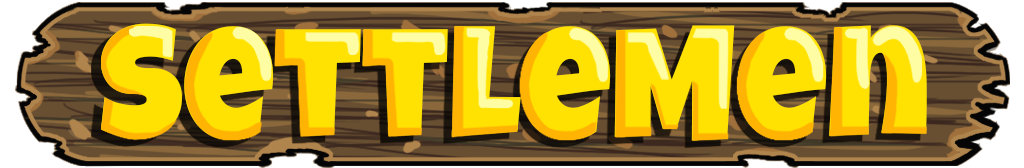
<style>
.page{position:relative;width:1024px;height:168px;background:#ffe201}
.page>*{position:absolute;margin:0}
.t1{font:158.2px "LuckiestGuy-Regular";color:#ffe201}
</style>
<div class="page">
<p class="t1" style="left:101px;top:23px;width:826px;height:118px">SettleMen</p>
</div>
